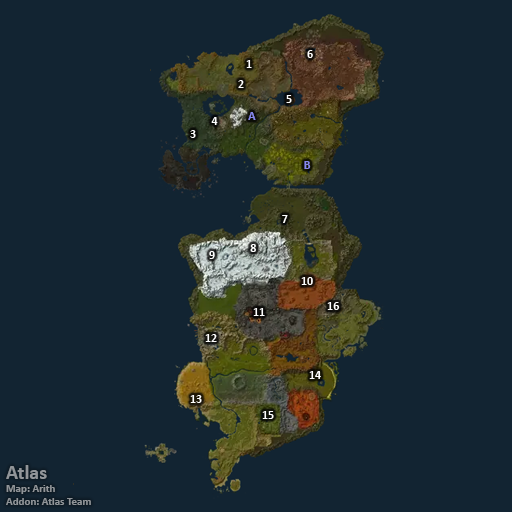
<style>
.page{position:relative;width:512px;height:512px;background:#122432}
.page>*{position:absolute;margin:0}
.t1{font:12px "Calibri-Bold";color:#ffffff}
.t2{font:12px "Calibri-Bold";color:#8788ee}
.t3{font:11px "Calibri-Bold";color:#919599}
.t4{font:20px "Calibri-Bold";color:#919599}
</style>
<div class="page">
<p class="t1" style="left:307px;top:50px;width:6px;height:8px">6</p>
<p class="t1" style="left:246px;top:60px;width:6px;height:8px">1</p>
<p class="t1" style="left:238px;top:80px;width:6px;height:8px">2</p>
<p class="t1" style="left:286px;top:95px;width:6px;height:8px">5</p>
<p class="t2" style="left:248px;top:112px;width:8px;height:8px">A</p>
<p class="t1" style="left:211px;top:117px;width:7px;height:8px">4</p>
<p class="t1" style="left:190px;top:130px;width:6px;height:8px">3</p>
<p class="t2" style="left:304px;top:161px;width:7px;height:8px">B</p>
<p class="t1" style="left:282px;top:215px;width:6px;height:8px">7</p>
<p class="t1" style="left:250px;top:244px;width:6px;height:8px">8</p>
<p class="t1" style="left:209px;top:251px;width:6px;height:8px">9</p>
<p class="t1" style="left:301px;top:277px;width:12px;height:8px">10</p>
<p class="t1" style="left:327px;top:302px;width:13px;height:8px">16</p>
<p class="t1" style="left:253px;top:308px;width:12px;height:8px">11</p>
<p class="t1" style="left:205px;top:334px;width:12px;height:8px">12</p>
<p class="t1" style="left:309px;top:371px;width:12px;height:8px">14</p>
<p class="t1" style="left:190px;top:395px;width:12px;height:8px">13</p>
<p class="t1" style="left:262px;top:411px;width:12px;height:8px">15</p>
<p class="t3" style="left:6px;top:465px;width:85px;height:40px"><span class="t4">Atlas<br></span>Map: Arith<br>Addon: Atlas Team</p>
</div>
